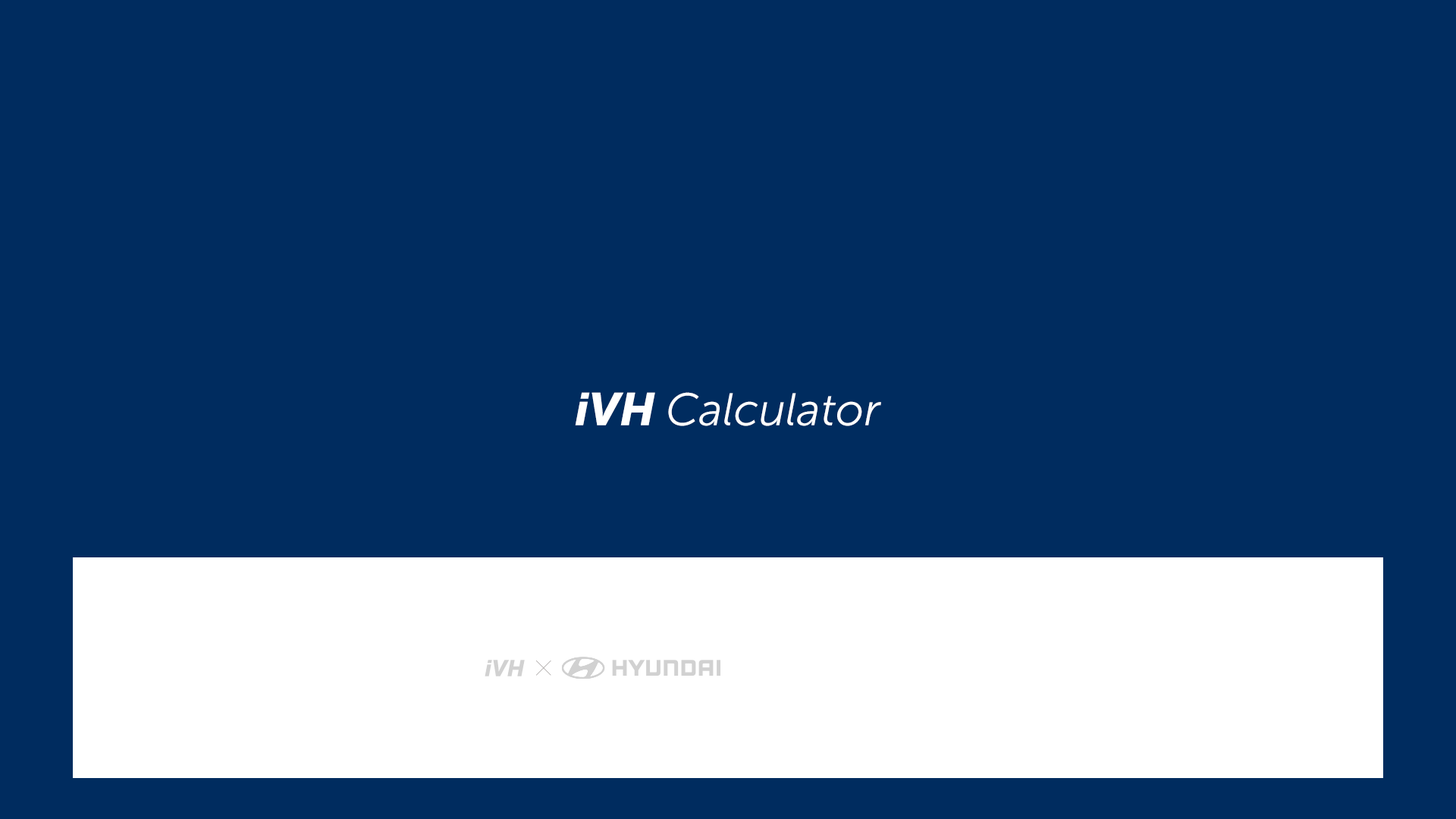
<style>
.page{position:relative;width:1456px;height:819px;background:#002c5f}
.page>*{position:absolute;margin:0}
.t1{font:45.5px "MuseoSans-300Italic";color:#ffffff}
.t2{font:45.5px "MuseoSans-900Italic";color:#ffffff}
.t3{font:22.7px "MuseoSans-900Italic";color:#d1d1d1}
</style>
<div class="page">
<p class="t1" style="left:575px;top:392px;width:306px;height:34px"><span class="t2">iVH </span>Calculator</p>
<p class="t3" style="left:485px;top:660px;width:40px;height:16px">iVH</p>
</div>
